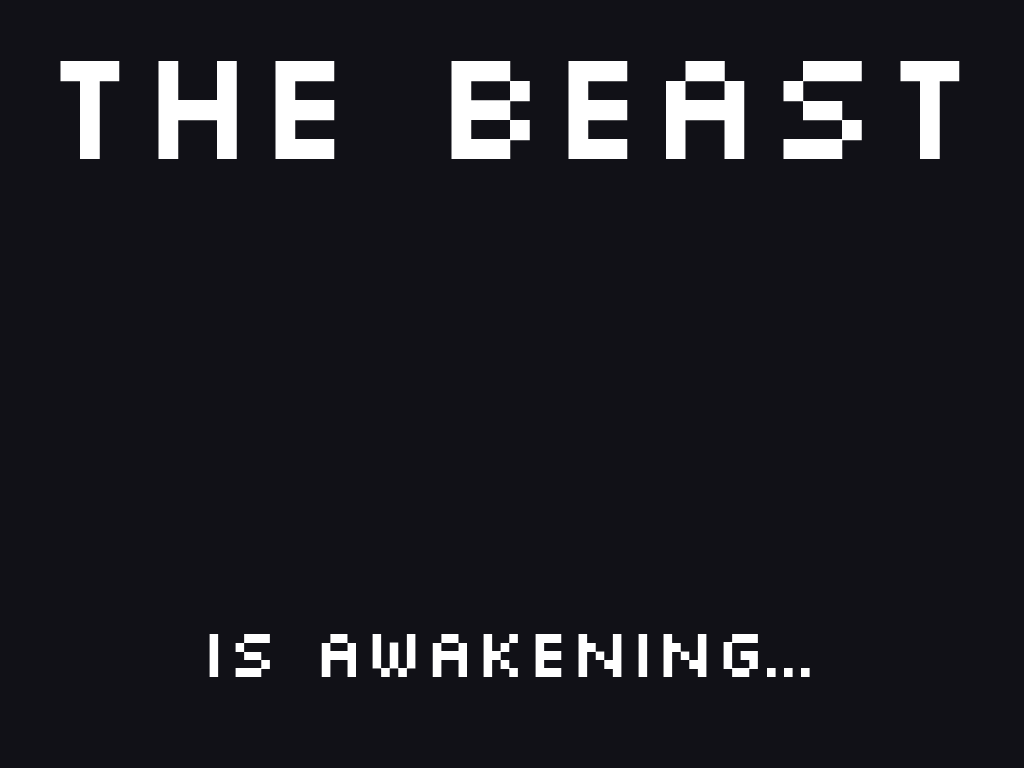
<style>
.page{position:relative;width:1024px;height:768px;background:#111117}
.page>*{position:absolute;margin:0}
.t1{font:72px "Silkscreen";color:#ffffff}
.t2{font:164px "Silkscreen";color:#ffffff}
</style>
<div class="page">
<p class="t1" style="left:60px;top:61px;width:900px;height:616px;text-align:center"><span class="t2">The Beast<br></span><br><br><br><br><br>Is Awakening...</p>
</div>
